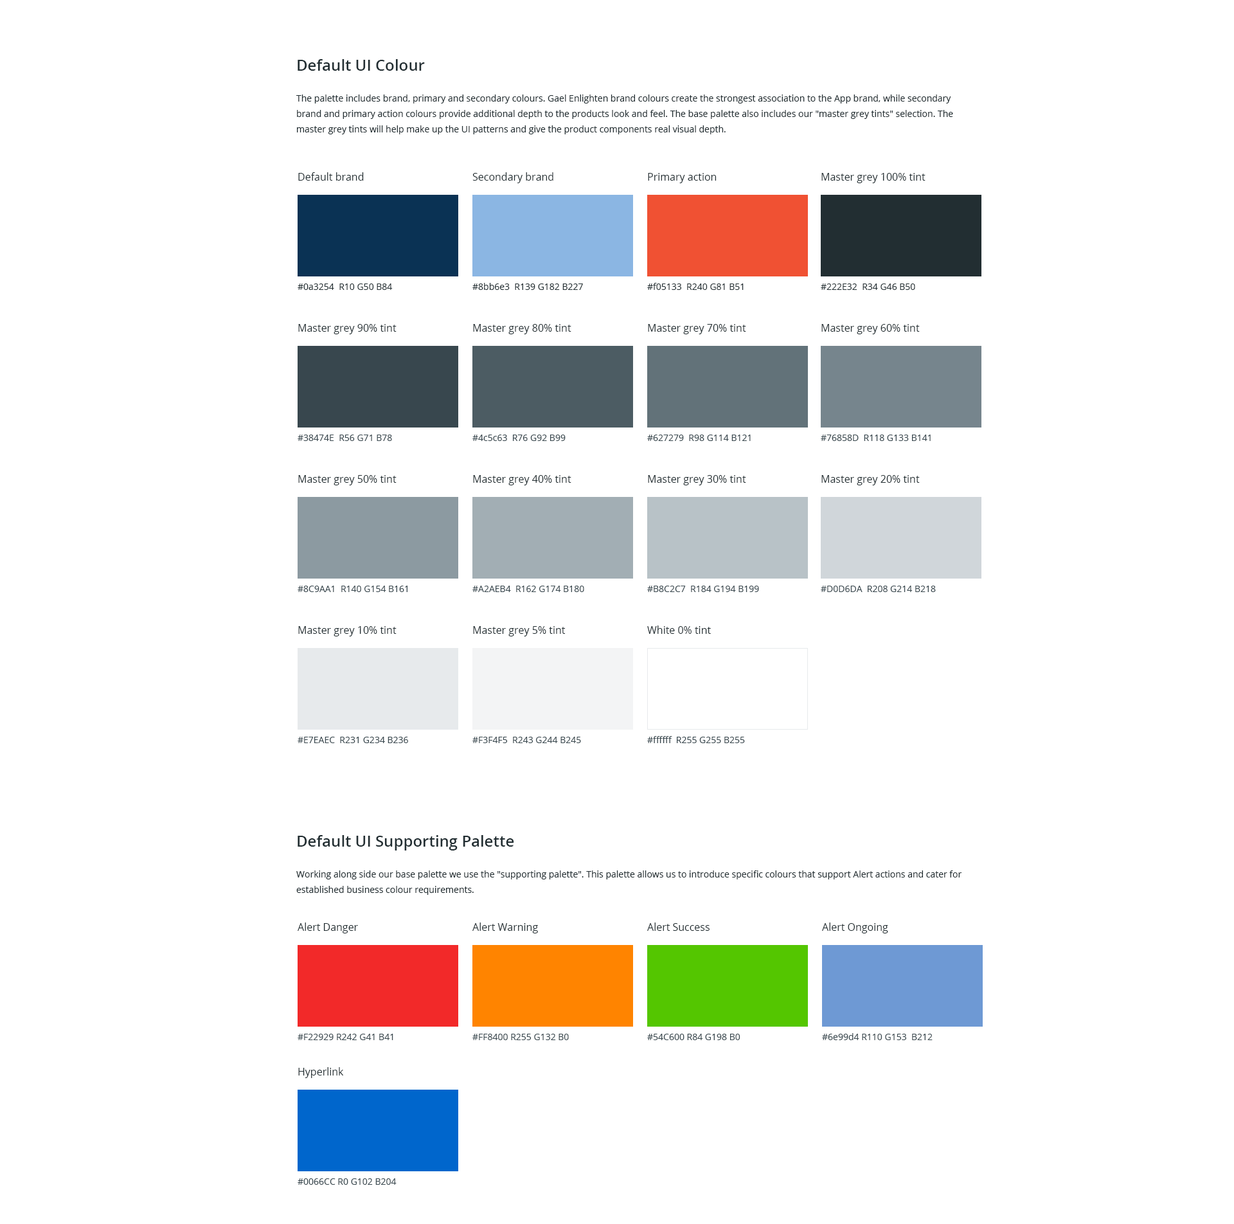
<style>
.page{position:relative;width:1234px;height:1224px;background:#ffffff}
.page>*{position:absolute;margin:0}
.t1{font:9px/15.4px "OpenSans";color:#222e32}
.t2{font:15.4px/15.4px "OpenSans-Semibold";color:#222e32}
.t3{font:10.3px "OpenSans";color:#222e32}
.t4{font:9px "OpenSans";color:#222e32}
.t5{font:9px "OpenSans";color:#38474e}
</style>
<div class="page">
<p class="t1" style="left:296px;top:59px;width:657px;height:75px"><span class="t2">Default UI Colour<br><br></span>The palette includes brand, primary and secondary colours. Gael Enlighten brand colours create the strongest association to the App brand, while secondary brand and primary action colours provide additional depth to the products look and feel. The base palette also includes our "master grey tints" selection. The master grey tints will help make up the UI patterns and give the product components real visual depth.</p>
<p class="t3" style="left:298px;top:172px;width:66px;height:9px">Default brand</p>
<p class="t3" style="left:473px;top:172px;width:81px;height:11px">Secondary brand</p>
<p class="t3" style="left:648px;top:173px;width:69px;height:10px">Primary action</p>
<p class="t3" style="left:822px;top:173px;width:104px;height:10px">Master grey 100% tint</p>
<p class="t4" style="left:298px;top:284px;width:95px;height:6px">#0a3254  R10 G50 B84</p>
<p class="t4" style="left:473px;top:283px;width:110px;height:7px">#8bb6e3  R139 G182 B227</p>
<p class="t4" style="left:647px;top:283px;width:97px;height:7px">#f05133  R240 G81 B51</p>
<p class="t4" style="left:821px;top:284px;width:94px;height:6px">#222E32  R34 G46 B50</p>
<p class="t3" style="left:298px;top:324px;width:99px;height:10px">Master grey 90% tint</p>
<p class="t3" style="left:473px;top:324px;width:99px;height:10px">Master grey 80% tint</p>
<p class="t3" style="left:648px;top:324px;width:98px;height:10px">Master grey 70% tint</p>
<p class="t3" style="left:822px;top:324px;width:98px;height:10px">Master grey 60% tint</p>
<p class="t5" style="left:298px;top:435px;width:94px;height:6px">#38474E  R56 G71 B78</p>
<p class="t5" style="left:473px;top:435px;width:93px;height:6px">#4c5c63  R76 G92 B99</p>
<p class="t5" style="left:647px;top:435px;width:104px;height:6px">#627279  R98 G114 B121</p>
<p class="t5" style="left:821px;top:435px;width:110px;height:6px">#76858D  R118 G133 B141</p>
<p class="t3" style="left:298px;top:475px;width:99px;height:10px">Master grey 50% tint</p>
<p class="t3" style="left:473px;top:475px;width:99px;height:10px">Master grey 40% tint</p>
<p class="t3" style="left:648px;top:475px;width:98px;height:10px">Master grey 30% tint</p>
<p class="t3" style="left:822px;top:475px;width:98px;height:10px">Master grey 20% tint</p>
<p class="t5" style="left:298px;top:586px;width:110px;height:6px">#8C9AA1  R140 G154 B161</p>
<p class="t5" style="left:473px;top:586px;width:111px;height:6px">#A2AEB4  R162 G174 B180</p>
<p class="t5" style="left:647px;top:586px;width:112px;height:6px">#B8C2C7  R184 G194 B199</p>
<p class="t5" style="left:821px;top:586px;width:115px;height:6px">#D0D6DA  R208 G214 B218</p>
<p class="t3" style="left:298px;top:626px;width:99px;height:10px">Master grey 10% tint</p>
<p class="t3" style="left:473px;top:626px;width:93px;height:10px">Master grey 5% tint</p>
<p class="t3" style="left:647px;top:626px;width:64px;height:8px">White 0% tint</p>
<p class="t5" style="left:298px;top:737px;width:110px;height:6px">#E7EAEC  R231 G234 B236</p>
<p class="t5" style="left:473px;top:737px;width:108px;height:6px">#F3F4F5  R243 G244 B245</p>
<p class="t5" style="left:647px;top:736px;width:98px;height:7px">#ffffff  R255 G255 B255</p>
<p class="t1" style="left:296px;top:835px;width:666px;height:60px"><span class="t2">Default UI Supporting Palette<br><br></span>Working along side our base palette we use the "supporting palette". This palette allows us to introduce specific colours that support Alert actions and cater for established business colour requirements.</p>
<p class="t3" style="left:298px;top:923px;width:60px;height:10px">Alert Danger</p>
<p class="t3" style="left:473px;top:923px;width:65px;height:10px">Alert Warning</p>
<p class="t3" style="left:647px;top:923px;width:63px;height:8px">Alert Success</p>
<p class="t3" style="left:822px;top:923px;width:66px;height:10px">Alert Ongoing</p>
<p class="t5" style="left:298px;top:1034px;width:95px;height:6px">#F22929 R242 G41 B41</p>
<p class="t5" style="left:473px;top:1034px;width:96px;height:6px">#FF8400 R255 G132 B0</p>
<p class="t5" style="left:647px;top:1034px;width:94px;height:6px">#54C600 R84 G198 B0</p>
<p class="t5" style="left:822px;top:1033px;width:111px;height:7px">#6e99d4 R110 G153  B212</p>
<p class="t3" style="left:298px;top:1067px;width:46px;height:11px">Hyperlink</p>
<p class="t5" style="left:298px;top:1178px;width:99px;height:7px">#0066CC R0 G102 B204</p>
</div>
